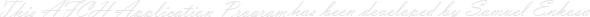
<style>
.page{position:relative;width:590px;height:17px;background:#ffffff}
.page>*{position:absolute;margin:0}
.t1{font:24px "VladimirScript";color:#e7e6e5}
</style>
<div class="page">
<p class="t1" style="left:0px;top:0px;width:288px;height:17px">This AFCH Application Program</p>
<p class="t1" style="left:287px;top:0px;width:303px;height:17px">has been developed by Samuel Enkosa</p>
</div>
